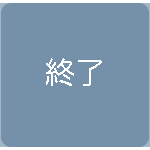
<style>
.page{position:relative;width:150px;height:150px;background:#7591a9}
.page>*{position:absolute;margin:0}
.t1{font:30px "HiraMaruPro-W4";color:#feffff}
</style>
<div class="page">
<p class="t1" style="left:46px;top:58px;width:56px;height:28px">終了</p>
</div>
